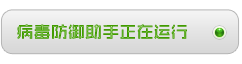
<style>
.page{position:relative;width:242px;height:64px;background:#ffffff}
.page>*{position:absolute;margin:0}
.t1{font:17.2px "ZHSRXT--GBK1-0"}
</style>
<div class="page">
<p class="t1" style="left:17px;top:24px;width:170px;height:15px">病毒防御助手正在运行</p>
</div>
